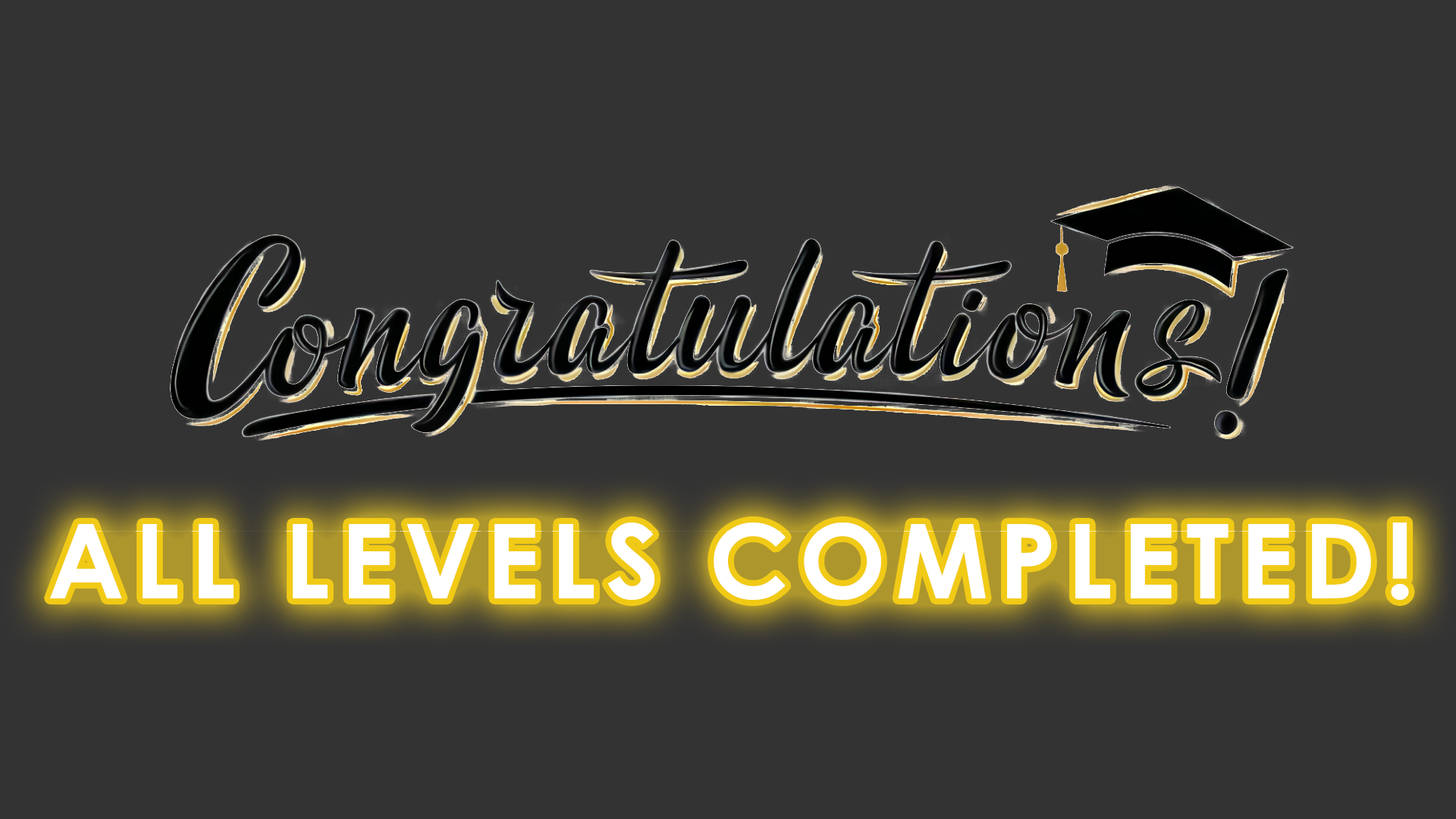
<style>
.page{position:relative;width:1456px;height:819px;background:#333333}
.page>*{position:absolute;margin:0}
.t1{font:102.9px "CenturyGothic-Bold";letter-spacing:0.1em;color:#ffffff}
</style>
<div class="page">
<p class="t1" style="left:50px;top:522px;width:1359px;height:78px">ALL LEVELS COMPLETED!</p>
</div>
